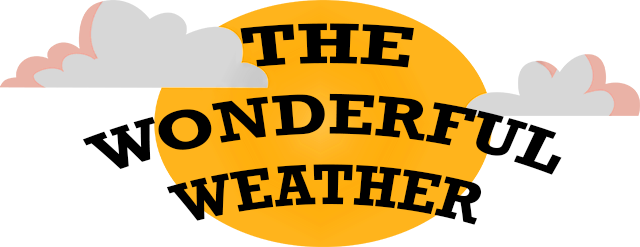
<style>
.page{position:relative;width:640px;height:247px;background:#ffffff}
.page>*{position:absolute;margin:0}
.t1{font:53.3px "Rockwell-Bold";color:#000000}
</style>
<div class="page">
<p class="t1" style="left:82px;top:23px;width:480px;height:202px;text-align:center">THE<br>WONDERFUL<br>WEATHER</p>
</div>
